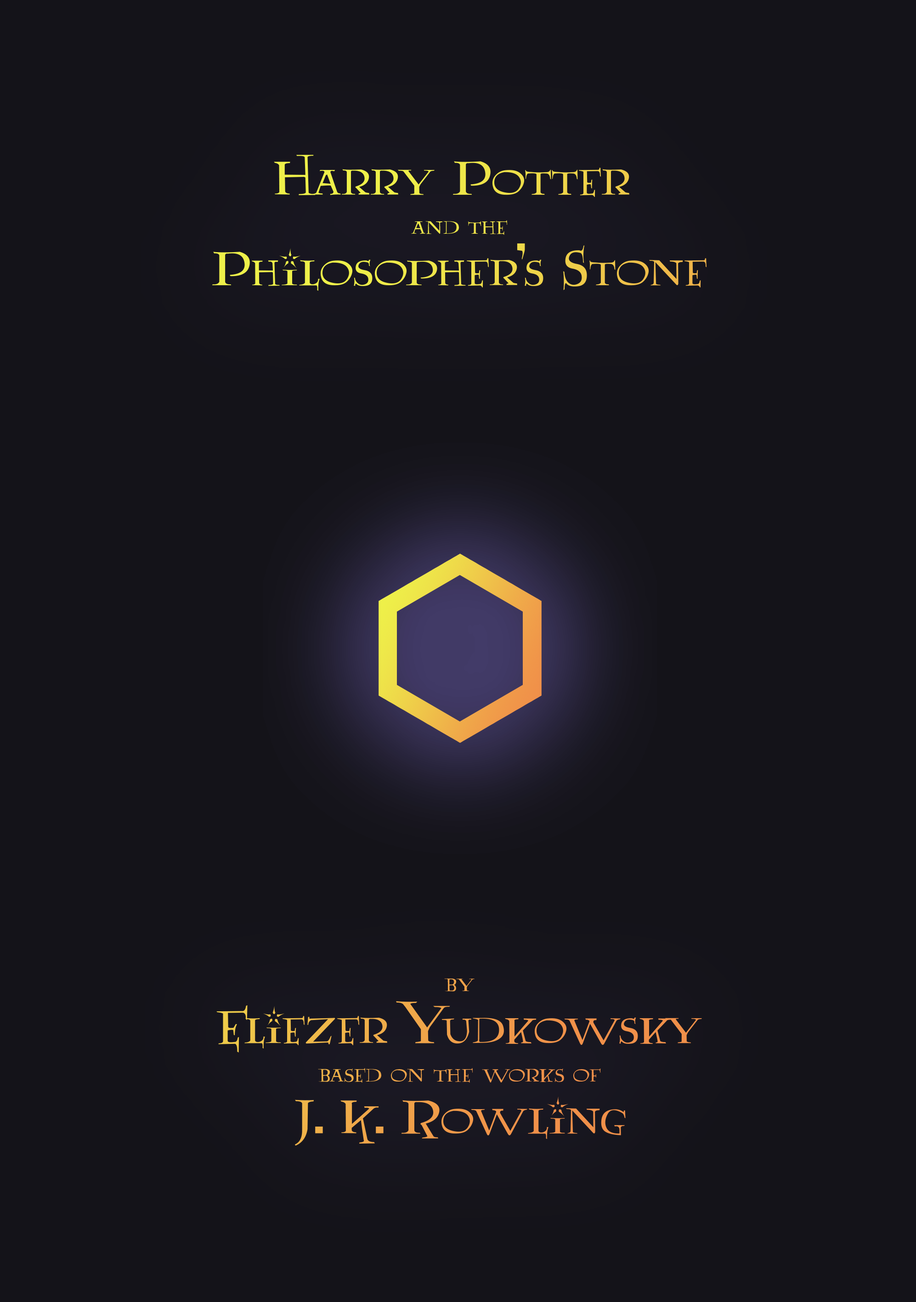
<style>
.page{position:relative;width:916px;height:1302px;background:#141319}
.page>*{position:absolute;margin:0}
.t1{font:55.1px/51.5px "Lumos";color:#eee649}
.t2{font:27.6px/38.9px "Lumos";color:#eee649}
.t3{font:27.6px/38.9px "Lumos";color:#f09e49}
.t4{font:27.6px/706.4px "Lumos";color:#f09e49}
.t5{font:55.1px/51.5px "Lumos";color:#f09e49}
</style>
<div class="page">
<p class="t1" style="left:212px;top:155px;width:494px;height:136px;text-align:center">Harry Potter <br><span class="t2">and the<br></span>Philosopher's Stone</p>
<p class="t3" style="left:216px;top:978px;width:486px;height:168px;text-align:center"><span class="t4">by<br></span><span class="t5">Eliezer Yudkowsky<br></span>based on the works of<br><span class="t5">J. K. Rowling</span></p>
</div>
